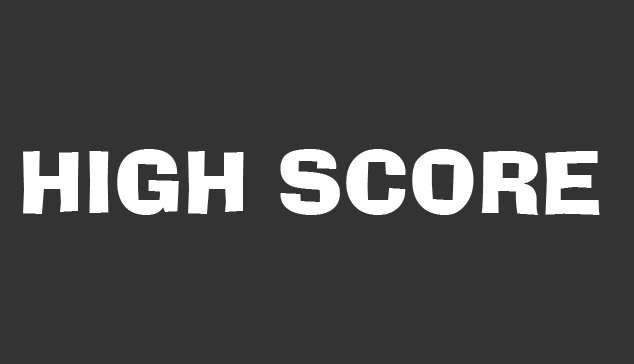
<style>
.page{position:relative;width:634px;height:364px;background:#333333}
.page>*{position:absolute;margin:0}
.t1{font:84px "AdLibBT-Regular";color:#ffffff}
</style>
<div class="page">
<p class="t1" style="left:23px;top:149px;width:577px;height:66px">HIGH SCORE</p>
</div>
